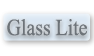
<style>
.page{position:relative;width:94px;height:56px;background:#ffffff}
.page>*{position:absolute;margin:0}
.t1{font:23px "TimesNewRomanPSMT";color:#6d7379;scale:0.86 1}
</style>
<div class="page">
<p class="t1" style="left:7px;top:19px;width:80px;height:17px">Glass Lite</p>
</div>
